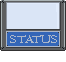
<style>
.page{position:relative;width:66px;height:62px;background:#dae5f6}
.page>*{position:absolute;margin:0}
.t1{font:11.1px "Immortal";color:#acb7c9}
</style>
<div class="page">
<p class="t1" style="left:10px;top:35px;width:47px;height:8px">STATUS</p>
</div>
